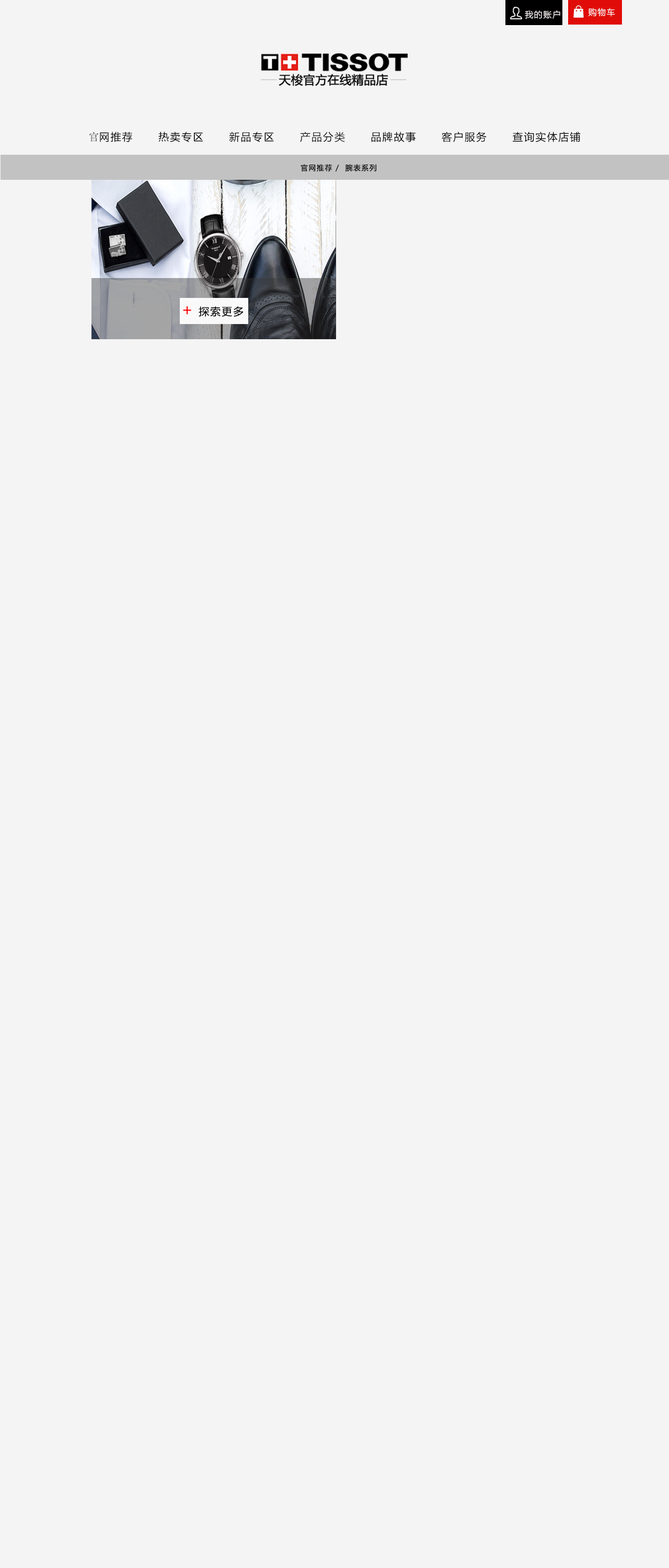
<style>
.page{position:relative;width:669px;height:1568px;background:#f4f4f4}
.page>*{position:absolute;margin:0}
.t1{font:10.5px "MicrosoftYaHei";letter-spacing:0.1em;color:#000000}
.t2{font:10.5px "NSimSun";color:#000000}
.t3{font:7.3px "MicrosoftYaHei";letter-spacing:0.1em;color:#040404}
.t4{font:10.5px "MicrosoftYaHei";letter-spacing:0.1em;color:#050505}
.t5{font:15.7px "MicrosoftYaHei";letter-spacing:0.1em;color:#fc0404}
</style>
<div class="page">
<p class="t1" style="left:89px;top:132px;width:492px;height:10px"><span class="t2">官</span>网推荐      热卖专区      新品专区      产品分类      品牌故事      客户服务      查询实体店铺</p>
<p class="t3" style="left:301px;top:164px;width:75px;height:7px">官网推荐 /  腕表系列</p>
<p class="t4" style="left:183px;top:306px;width:60px;height:11px"><span class="t5">+</span> 探索更多</p>
</div>
